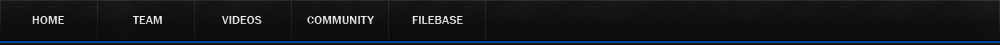
<style>
.page{position:relative;width:1000px;height:45px}
.page>*{position:absolute;margin:0}
.t1{font:12.4px "FranklinGothic-Medium";color:#e2e2e2}
</style>
<div class="page">
<p class="t1" style="left:32px;top:16px;width:32px;height:8px">HOME</p>
<p class="t1" style="left:132px;top:16px;width:30px;height:8px">TEAM</p>
<p class="t1" style="left:222px;top:16px;width:40px;height:8px">VIDEOS</p>
<p class="t1" style="left:307px;top:16px;width:67px;height:8px">COMMUNITY</p>
<p class="t1" style="left:412px;top:16px;width:51px;height:8px">FILEBASE</p>
</div>
